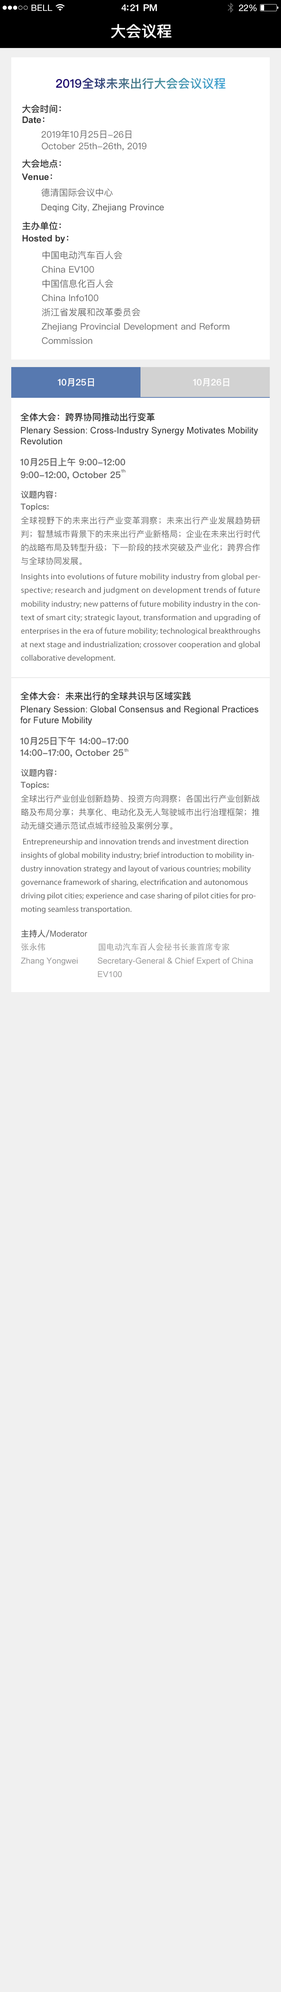
<style>
.page{position:relative;width:281px;height:1992px;background:#f0f0f0}
.page>*{position:absolute;margin:0}
.t1{font:8.6px "HelveticaNeue";letter-spacing:0.02em;color:#ffffff}
.t2{font:9.4px "HelveticaNeue-Medium";letter-spacing:-0.02em;color:#ffffff}
.t3{font:9px "HelveticaNeue";letter-spacing:-0.02em;color:#ffffff}
.t4{font:15px "PingFangSC-Regular";color:#ffffff;font-weight:bold}
.t5{font:12px "PingFangSC-Semibold"}
.t6{font:9px "PingFangSC-Semibold";color:#333333}
.t7{font:9px "Arial-BoldMT";color:#333333}
.t8{font:9px "PingFangSC-Regular";color:#666666}
.t9{font:9px "ArialMT";color:#666666}
.t10{font:9px/14.2px "PingFangSC-Regular";color:#666666}
.t11{font:9px/16.5px "PingFangSC-Regular";color:#666666}
.t12{font:9px "PingFangSC-Semibold";color:#ffffff}
.t13{font:9px "ArialMT";color:#333333}
.t14{font:9px "PingFangSC-Semibold";color:#666666}
.t15{font:4.5px "PingFangSC-Semibold";color:#666666}
.t16{font:8.3px "PingFangSC-Semibold";color:#666666}
.t17{font:8.3px/13.5px "PingFangSC-Regular";color:#666666}
.t18{font:8.3px/13.5px "MyriadPro-Regular";color:#666666}
.t19{font:8.3px/13.5px "ArialMT";color:#999999}
.t20{font:8.3px/13.5px "PingFangSC-Semibold";color:#666666}
.t21{font:8.3px/13.5px "ArialMT";color:#666666}
.t22{font:8.3px/13.5px "AdobeHeitiStd-Regular";color:#999999}
</style>
<div class="page">
<p class="t1" style="left:32px;top:4px;width:20px;height:7px">BELL</p>
<p class="t2" style="left:122px;top:4px;width:35px;height:7px">4:21 PM</p>
<p class="t3" style="left:239px;top:4px;width:18px;height:7px">22%</p>
<p class="t4" style="left:111px;top:24px;width:61px;height:14px">大会议程</p>
<p class="t5" style="left:56px;top:78px;width:170px;height:11px">2019全球未来出行大会会议议程</p>
<p class="t6" style="left:22px;top:105px;width:39px;height:8px">大会时间：</p>
<p class="t7" style="left:22px;top:116px;width:23px;height:7px">Date<span class="t6">：</span></p>
<p class="t8" style="left:42px;top:130px;width:90px;height:9px">2019年10月25日-26日</p>
<p class="t8" style="left:42px;top:142px;width:105px;height:9px">October 25th-26th, 2019</p>
<p class="t6" style="left:22px;top:159px;width:39px;height:9px">大会地点：</p>
<p class="t7" style="left:22px;top:173px;width:30px;height:7px">Venue<span class="t6">：</span></p>
<p class="t8" style="left:41px;top:188px;width:72px;height:9px">德清国际会议中心</p>
<p class="t9" style="left:41px;top:204px;width:123px;height:8px">Deqing City, Zhejiang Province</p>
<p class="t6" style="left:22px;top:222px;width:39px;height:8px">主办单位：</p>
<p class="t7" style="left:22px;top:235px;width:47px;height:8px">Hosted by<span class="t6">：</span></p>
<p class="t10" style="left:42px;top:251px;width:188px;height:93px;text-align:justify"><span class="t11"><br><br><br></span>中国电动汽车百人会<br>China EV100<br>中国信息化百人会<br>China Info100<br>浙江省发展和改革委员会<br>Zhejiang Provincial Development and Reform <br>Commission</p>
<p class="t12" style="left:58px;top:378px;width:36px;height:9px">10月25日</p>
<p class="t12" style="left:193px;top:378px;width:37px;height:9px">10月26日</p>
<p class="t6" style="left:20px;top:413px;width:135px;height:9px">全体大会：跨界协同推动出行变革</p>
<p class="t13" style="left:21px;top:427px;width:237px;height:18px">Plenary Session: Cross-Industry Synergy Motivates Mobility<br>Revolution</p>
<p class="t14" style="left:20px;top:458px;width:105px;height:8px">10月25日上午 9:00-12:00</p>
<p class="t14" style="left:21px;top:471px;width:100px;height:9px">9:00-12:00, October 25</p>
<p class="t15" style="left:122px;top:469px;width:4px;height:3px">th</p>
<p class="t16" style="left:21px;top:490px;width:36px;height:9px">议题内容：</p>
<p class="t16" style="left:21px;top:504px;width:28px;height:8px">Topics:</p>
<p class="t17" style="left:21px;top:516px;width:239px;height:49px;text-align:justify">全球视野下的未来出行产业变革洞察；未来出行产业发展趋势研判；智慧城市背景下的未来出行产业新格局；企业在未来出行时代的战略布局及转型升级；下一阶段的技术突破及产业化；跨界合作与全球协同发展。</p>
<p class="t18" style="left:21px;top:573px;width:240px;height:90px;text-align:justify">Insights into evolutions of future mobility industry from global perspective; research and judgment on development trends of future mobility industry; new patterns of future mobility industry in the context of smart city; strategic layout, transformation and upgrading of enterprises in the era of future mobility; technological breakthroughs at next stage and industrialization; crossover cooperation and global collaborative development.</p>
<p class="t6" style="left:20px;top:692px;width:171px;height:8px">全体大会：未来出行的全球共识与区域实践</p>
<p class="t13" style="left:20px;top:706px;width:239px;height:19px">Plenary Session: Global Consensus and Regional Practices <br>for Future Mobility</p>
<p class="t14" style="left:20px;top:737px;width:109px;height:9px">10月25日下午 14:00-17:00</p>
<p class="t14" style="left:20px;top:749px;width:103px;height:9px">14:00-17:00, October 25</p>
<p class="t15" style="left:124px;top:748px;width:5px;height:4px">th</p>
<p class="t16" style="left:21px;top:769px;width:36px;height:8px">议题内容：</p>
<p class="t16" style="left:21px;top:782px;width:28px;height:8px">Topics:</p>
<p class="t17" style="left:21px;top:795px;width:239px;height:35px">全球出行产业创业创新趋势、投资方向洞察；各国出行产业创新战略及布局分享；共享化、电动化及无人驾驶城市出行治理框架；推动无缝交通示范试点城市经验及案例分享。</p>
<p class="t18" style="left:21px;top:838px;width:235px;height:76px">Entrepreneurship and innovation trends and investment direction insights of global mobility industry; brief introduction to mobility industry innovation strategy and layout of various countries; mobility governance framework of sharing, electrification and autonomous driving pilot cities; experience and case sharing of pilot cities for promoting seamless transportation.</p>
<p class="t19" style="left:21px;top:930px;width:232px;height:48px;text-align:justify"><span class="t20">主持人/</span><span class="t21">Moderator<br></span><span class="t22">张永伟                    国电动汽车百人会秘书长兼首席专家</span><br>Zhang Yongwei     Secretary-General &amp; Chief Expert of China <br>                                 EV100</p>
</div>
